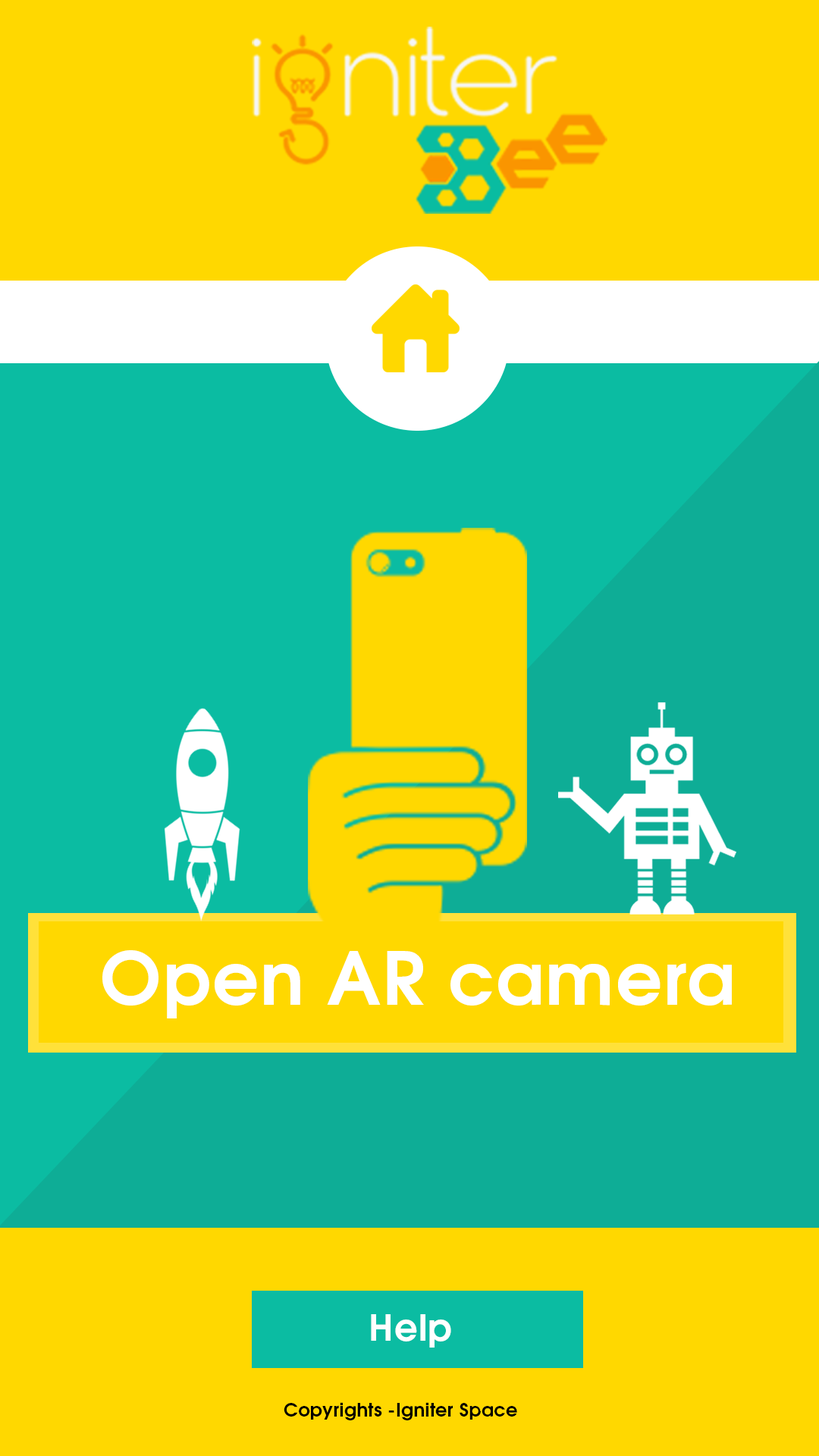
<style>
.page{position:relative;width:819px;height:1456px;background:#ffd800}
.page>*{position:absolute;margin:0}
.t1{font:73px "TeXGyreAdventor-Bold";letter-spacing:0.02em;color:#ffffff}
.t2{font:36.4px "TeXGyreAdventor-Bold";letter-spacing:0.02em;color:#ffffff}
.t3{font:18.3px "TeXGyreAdventor-Bold";letter-spacing:0.02em;color:#000000}
</style>
<div class="page">
<p class="t1" style="left:102px;top:950px;width:630px;height:68px">Open AR camera</p>
<p class="t2" style="left:371px;top:1314px;width:80px;height:34px">Help</p>
<p class="t3" style="left:284px;top:1402px;width:233px;height:18px">Copyrights -Igniter Space</p>
</div>
